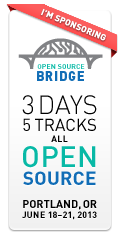
<style>
.page{position:relative;width:120px;height:240px;background:#ffffff}
.page>*{position:absolute;margin:0}
.t1{font:7px "DINPro-Bold";letter-spacing:0.02em;color:#08b9a6}
.t2{font:13px "DINPro-Black";letter-spacing:0.06em;color:#116db6}
.t3{font:13px "DINPro-Black";letter-spacing:0.02em;color:#116db6}
.t4{font:13px "DINPro-Black";letter-spacing:0.03em;color:#116db6}
.t5{font:17px/17px "DINPro-Regular";color:#000000}
.t6{font:26px/10px "DINPro-Light";color:#000000}
.t7{font:9px/11px "DINPro-Bold";letter-spacing:0.02em;color:#000000}
.t8{font:29px/25px "DINPro-Medium";letter-spacing:0.02em;color:#08b9a6}
.t9{font:19px/18px "DINPro-Bold";letter-spacing:0.02em;color:#116db6}
.t10{font:9px/10px "DIN-Bold";letter-spacing:0.02em;color:#000000}
.t11{font:11px/10px "DIN-Bold";color:#000000}
</style>
<div class="page">
<p class="t1" style="left:37px;top:64px;width:48px;height:5px">OPEN SOURCE</p>
<p class="t2" style="left:37px;top:71px;width:47px;height:10px"><span class="t3">B</span>RI<span class="t4">D</span><span class="t3">GE</span></p>
<p class="t5" style="left:22px;top:95px;width:75px;height:90px;text-align:center"><span class="t6">3 DAYS<br></span>5 TRACKS<br><span class="t7">ALL<br></span><span class="t8">OPEN<br></span><span class="t9">SOURCE</span></p>
<p class="t10" style="left:22px;top:200px;width:75px;height:20px;text-align:center"><span class="t11">PORTLAND, OR<br></span>JUNE 18–21, 2013</p>
</div>
